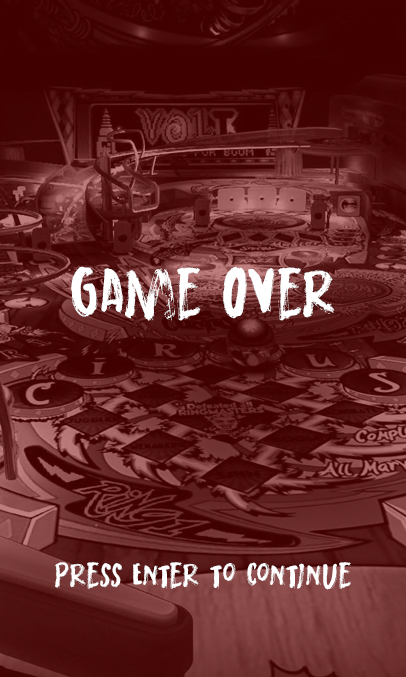
<style>
.page{position:relative;width:406px;height:677px}
.page>*{position:absolute;margin:0}
.t1{font:72px "MortalCoilDEMO-Regular";color:#ffffff}
.t2{font:36px "MortalCoilDEMO-Regular";color:#ffffff}
</style>
<div class="page">
<p class="t1" style="left:71px;top:266px;width:264px;height:55px">Game Over</p>
<p class="t2" style="left:55px;top:562px;width:296px;height:28px">Press Enter to continue</p>
</div>
